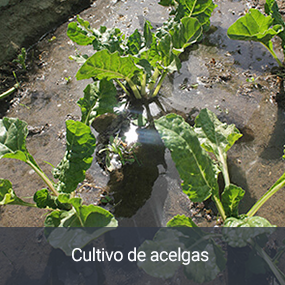
<style>
.page{position:relative;width:285px;height:285px}
.page>*{position:absolute;margin:0}
.t1{font:18px "Roboto-Regular";letter-spacing:-0.025em;color:#fafbfe}
</style>
<div class="page">
<p class="t1" style="left:72px;top:247px;width:137px;height:18px">Cultivo de acelgas</p>
</div>
